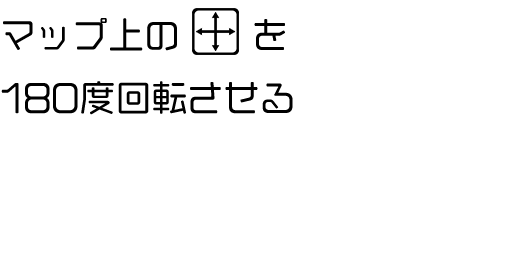
<style>
.page{position:relative;width:512px;height:256px;background:#ffffff}
.page>*{position:absolute;margin:0}
.t1{font:36px "VDL-GigaMaru-Medium";color:#000000}
</style>
<div class="page">
<p class="t1" style="left:1px;top:18px;width:292px;height:97px">マップ上の　　を<br>180度回転させる</p>
</div>
